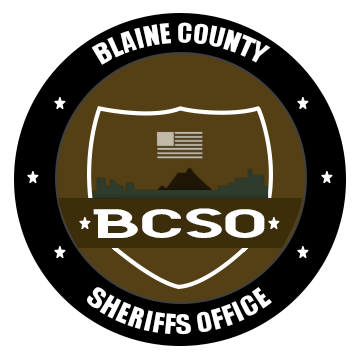
<style>
.page{position:relative;width:360px;height:360px;background:#ffffff}
.page>*{position:absolute;margin:0}
.t1{font:25px/40px "Impact";color:#ffffff}
.t2{font:41.2px "GilbertBold";letter-spacing:-0.02em;color:#ffffff;scale:2.02 1}
</style>
<div class="page">
<p class="t1" style="left:91px;top:22px;width:180px;height:43px;text-align:justify">BLAINE COUNTY</p>
<p class="t2" style="left:93px;top:208px;width:172px;height:30px">BCSO</p>
<p class="t1" style="left:87px;top:287px;width:185px;height:48px;text-align:justify">SHERIFFS OFFICE</p>
</div>
